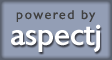
<style>
.page{position:relative;width:112px;height:60px;background:#939eb5}
.page>*{position:absolute;margin:0}
.t1{font:12px "Chantilly-Regular";letter-spacing:0.14em;color:#414141}
.t2{font:28px "Chantilly-Medium";color:#ffffff}
</style>
<div class="page">
<p class="t1" style="left:16px;top:10px;width:80px;height:12px">powered by</p>
<p class="t2" style="left:11px;top:24px;width:90px;height:28px">aspectj</p>
</div>
